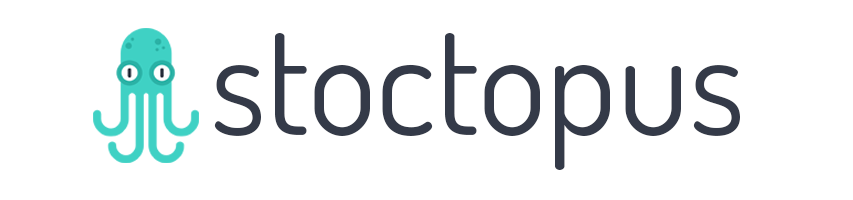
<style>
.page{position:relative;width:853px;height:200px;background:#ffffff}
.page>*{position:absolute;margin:0}
.t1{font:145.8px "Dosis-Regular";color:#343a48}
</style>
<div class="page">
<p class="t1" style="left:214px;top:33px;width:526px;height:137px">stoctopus</p>
</div>
